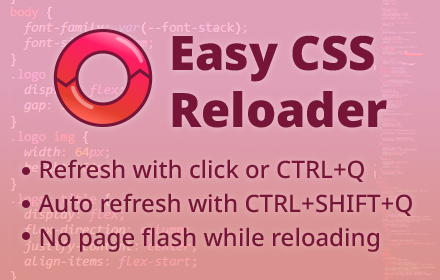
<style>
.page{position:relative;width:440px;height:280px}
.page>*{position:absolute;margin:0}
.t1{font:47.5px "NotoSans-Black";color:#771538}
.t2{font:24px/34px "NotoSans-Medium";color:#771538}
</style>
<div class="page">
<p class="t1" style="left:172px;top:35px;width:215px;height:93px">Easy CSS<br>Reloader</p>
<p class="t2" style="left:38px;top:159px;width:374px;height:93px">Refresh with click or CTRL+Q<br>Auto refresh with CTRL+SHIFT+Q<br>No page flash while reloading</p>
</div>
